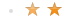
<style>
.page{position:relative;width:66px;height:18px;background:#ffffff}
.page>*{position:absolute;margin:0}
.t1{font:20px "SegoeUISymbol"}
</style>
<div class="page">
<p class="t1" style="left:25px;top:2px;width:15px;height:14px">★</p>
<p class="t1" style="left:47px;top:2px;width:15px;height:14px">★</p>
</div>
